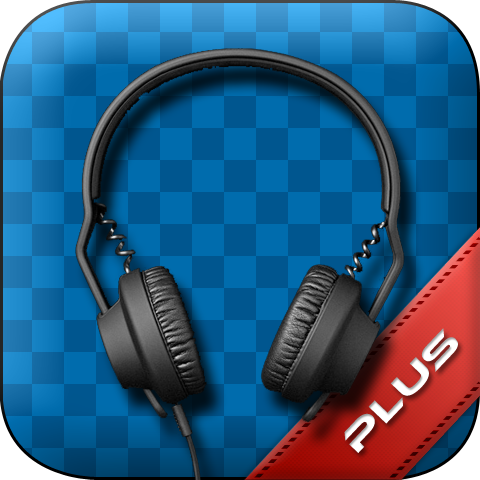
<style>
.page{position:relative;width:480px;height:480px}
.page>*{position:absolute;margin:0}
.t1{font:36px "EthnocentricRg-Regular";color:#ffffff;scale:1.14 1}
</style>
<div class="page">
<p class="t1" style="left:344px;top:328px;width:114px;height:125px;rotate:-46deg">PLUS</p>
</div>
